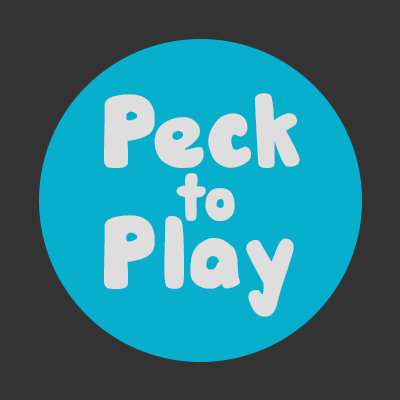
<style>
.page{position:relative;width:400px;height:400px;background:#333333}
.page>*{position:absolute;margin:0}
.t1{font:75.7px "DJBHUNKYCHUNK-Bold";color:#dedede}
.t2{font:49.3px "DJBHUNKYCHUNK-Bold";color:#dedede}
</style>
<div class="page">
<p class="t1" style="left:104px;top:93px;width:196px;height:75px">Peck</p>
<p class="t2" style="left:176px;top:173px;width:59px;height:48px">to</p>
<p class="t1" style="left:104px;top:215px;width:190px;height:102px">Play</p>
</div>
